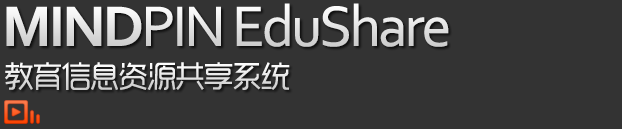
<style>
.page{position:relative;width:622px;height:129px;background:#333333}
.page>*{position:absolute;margin:0}
.t1{font:60px "Corbel";letter-spacing:-0.05em;color:#e3e3e3}
.t2{font:60px "Corbel-Bold";letter-spacing:-0.05em;color:#e3e3e3}
.t3{font:30px "RTWSYueGoG0v1-Regular";letter-spacing:-0.05em;color:#e8e8e8}
</style>
<div class="page">
<p class="t1" style="left:6px;top:3px;width:443px;height:44px"><span class="t2">MIND</span>PIN EduShare</p>
<p class="t3" style="left:5px;top:62px;width:285px;height:28px">教育信息资源共享系统</p>
</div>
